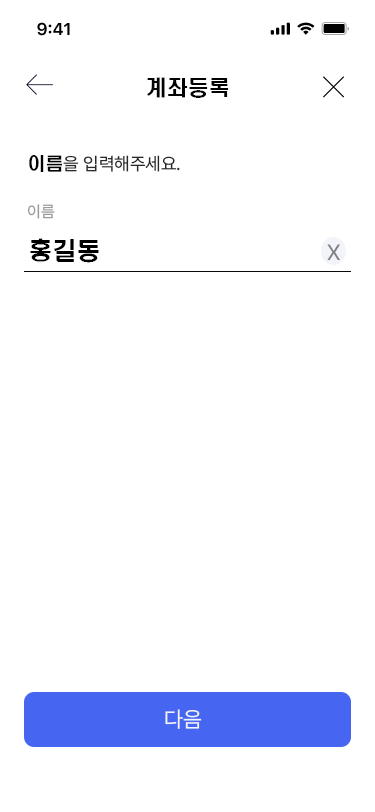
<style>
.page{position:relative;width:375px;height:812px;background:#ffffff}
.page>*{position:absolute;margin:0}
.t1{font:21px "H2hdrM";color:#030303}
.t2{font:18px "Pretendard-Regular";color:#29292a}
.t3{font:18px "H2hdrM";color:#030303}
.t4{font:16px "Pretendard-Regular";color:#98999c}
.t5{font:24px "H2hdrM";color:#000000}
.t6{font:22px "Pretendard-Regular";color:#818286}
.t7{font:22px "Pretendard-Regular";color:#f3f4f9}
</style>
<div class="page">
<p class="t1" style="left:147px;top:77px;width:82px;height:21px">계좌등록</p>
<p class="t2" style="left:29px;top:155px;width:151px;height:17px"><span class="t3">이름</span>을 입력해주세요.</p>
<p class="t4" style="left:28px;top:204px;width:27px;height:15px">이름</p>
<p class="t5" style="left:30px;top:238px;width:69px;height:25px">홍길동</p>
<p class="t6" style="left:327px;top:244px;width:13px;height:17px">X</p>
<p class="t7" style="left:165px;top:709px;width:37px;height:20px">다음</p>
</div>
